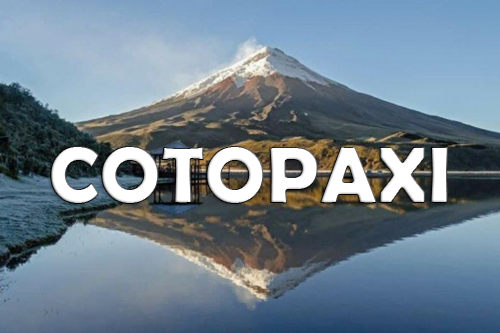
<style>
.page{position:relative;width:500px;height:333px}
.page>*{position:absolute;margin:0}
.t1{font:82.1px "BerlinSansFBDemi-Bold";color:#ffffff}
</style>
<div class="page">
<p class="t1" style="left:50px;top:146px;width:398px;height:58px">COTOPAXI</p>
</div>
